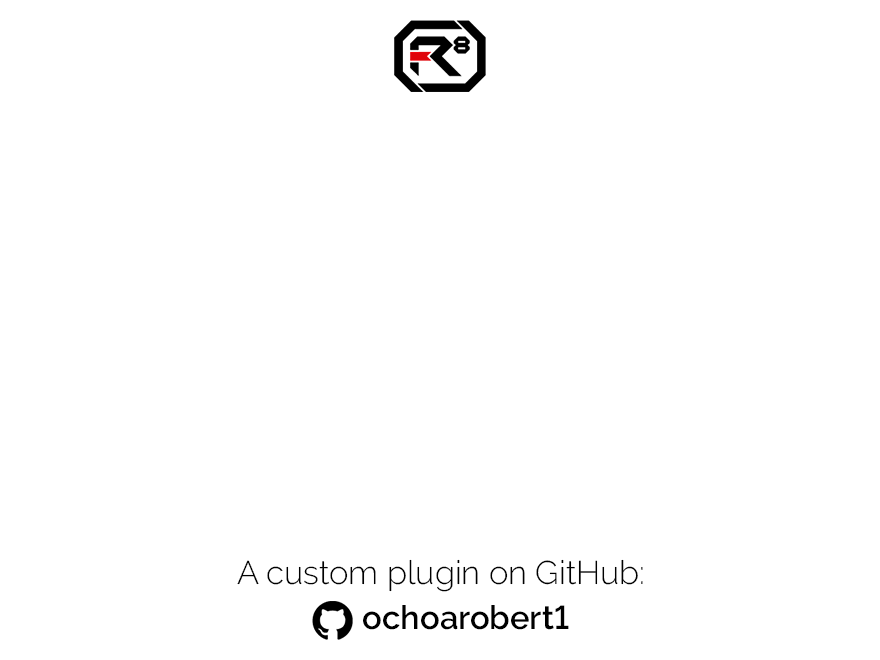
<style>
.page{position:relative;width:880px;height:660px;background:#ffffff}
.page>*{position:absolute;margin:0}
.t1{font:32.8px "Raleway-Light";color:#000000}
.t2{font:32.8px "Raleway-SemiBold";color:#000000}
</style>
<div class="page">
<p class="t1" style="left:237px;top:559px;width:406px;height:33px">A custom plugin on GitHub:</p>
<p class="t2" style="left:363px;top:605px;width:206px;height:25px">ochoarobert1</p>
</div>
